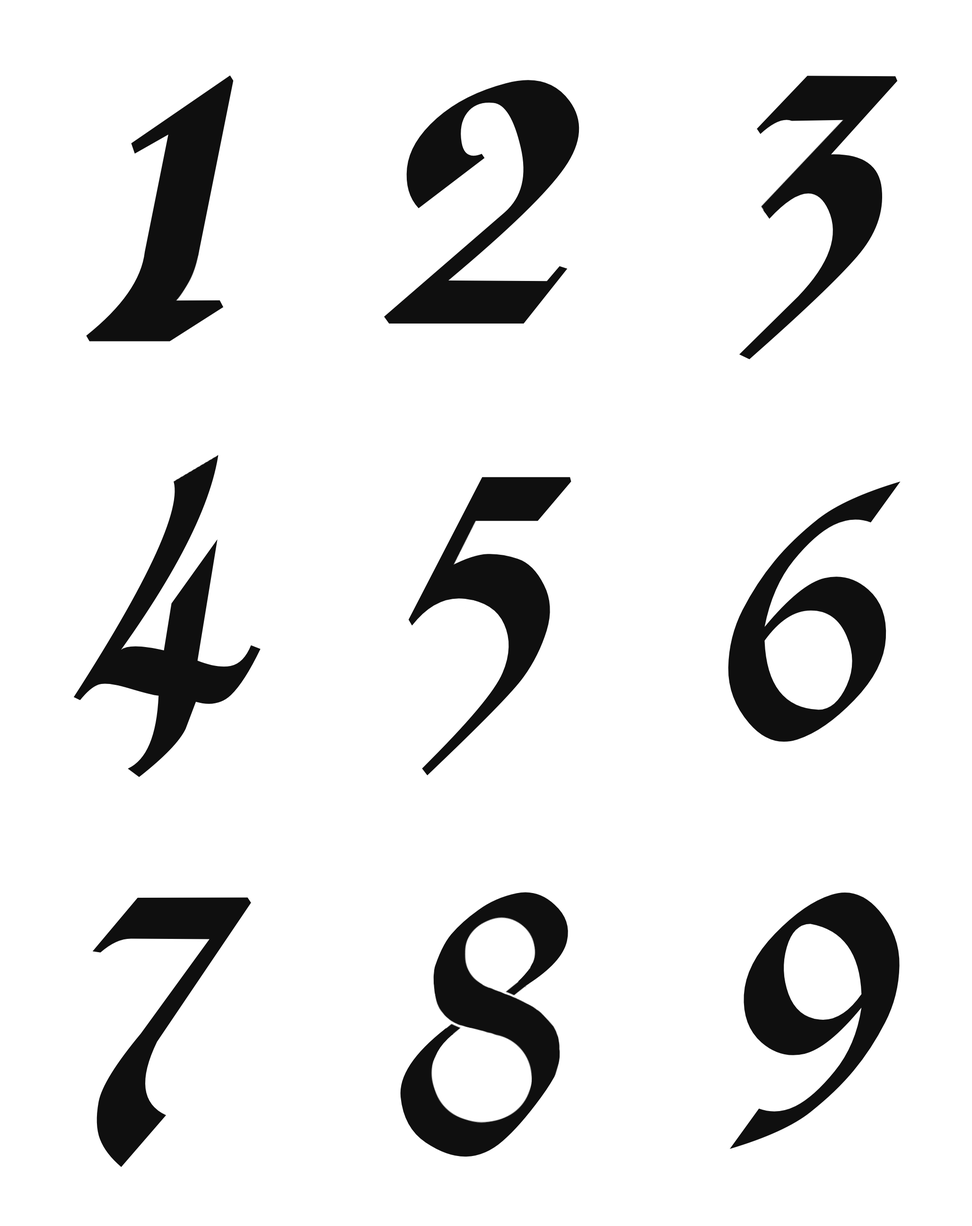
<style>
.page{position:relative;width:972px;height:1226px;background:#ffffff}
.page>*{position:absolute;margin:0}
.t1{font:602.5px "Kingthings-Calligraphica-Italic";color:#000000}
.t2{font:449.7px "Kingthings-Calligraphica-Italic";color:#000000}
.t3{font:565.2px "Kingthings-Calligraphica-Italic";color:#000000}
.t4{font:419.8px "Kingthings-Calligraphica-Italic";color:#000000}
.t5{font:468.4px "Kingthings-Calligraphica-Italic";color:#000000}
.t6{font:406.6px "Kingthings-Calligraphica-Italic";color:#000000}
.t7{font:587.7px "Kingthings-Calligraphica-Italic";color:#000000;scale:0.84 1}
.t8{font:400.8px "Kingthings-Calligraphica-Italic";color:#000000}
.t9{font:424px "Kingthings-Calligraphica-Italic";color:#000000;scale:1.12 1}
</style>
<div class="page">
<p class="t1" style="left:86px;top:75px;width:148px;height:267px">1</p>
<p class="t2" style="left:740px;top:76px;width:158px;height:284px">3</p>
<p class="t3" style="left:384px;top:80px;width:196px;height:244px">2</p>
<p class="t4" style="left:74px;top:430px;width:187px;height:347px">4</p>
<p class="t5" style="left:408px;top:477px;width:164px;height:299px">5</p>
<p class="t6" style="left:728px;top:482px;width:173px;height:260px">6</p>
<p class="t7" style="left:400px;top:892px;width:168px;height:265px">8</p>
<p class="t8" style="left:730px;top:893px;width:170px;height:256px">9</p>
<p class="t9" style="left:93px;top:898px;width:158px;height:270px">7</p>
</div>
